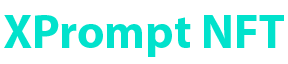
<style>
.page{position:relative;width:288px;height:64px;background:#ffffff}
.page>*{position:absolute;margin:0}
.t1{font:47.5px "MyriadPro-Bold";color:#01e2cc}
</style>
<div class="page">
<p class="t1" style="left:4px;top:15px;width:280px;height:42px">XPrompt NFT</p>
</div>
